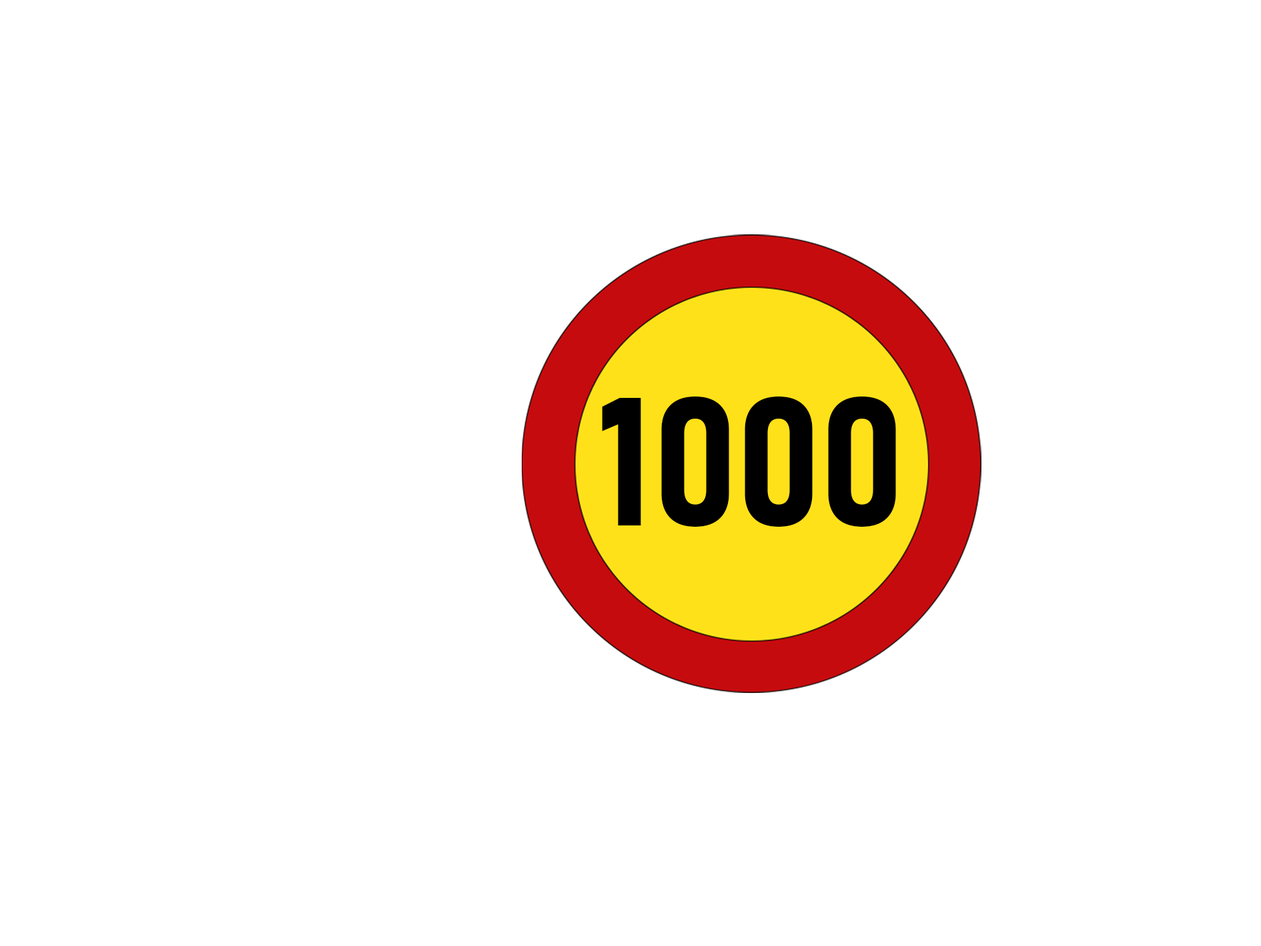
<style>
.page{position:relative;width:1261px;height:946px;background:#ffffff}
.page>*{position:absolute;margin:0}
.t1{font:179.4px "Bahnschrift-BoldSemiCondensed";color:#000000}
</style>
<div class="page">
<p class="t1" style="left:602px;top:396px;width:294px;height:130px">1000</p>
</div>
